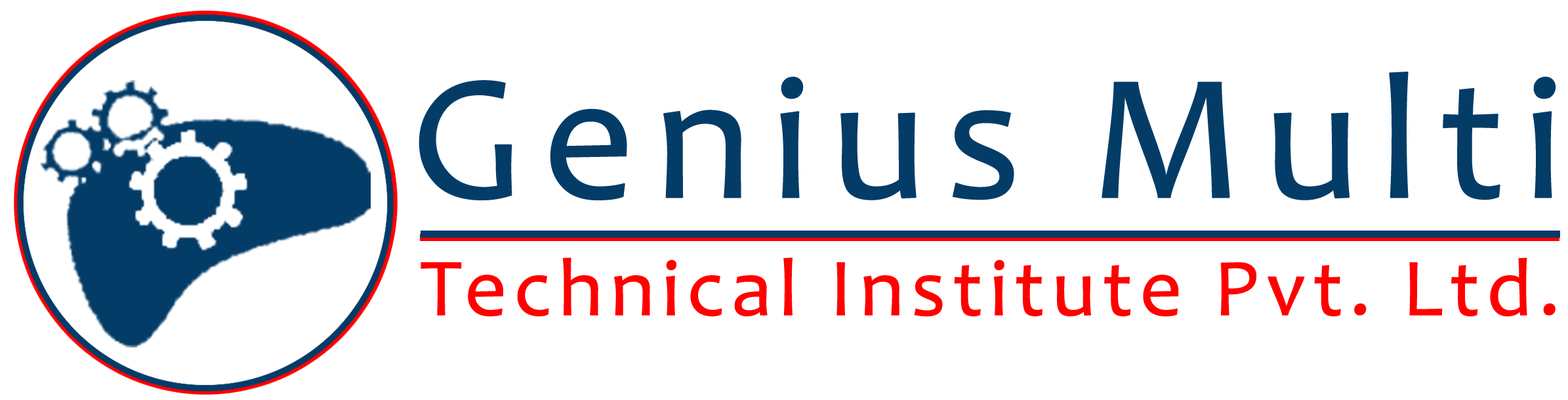
<style>
.page{position:relative;width:1568px;height:400px;background:#ffffff}
.page>*{position:absolute;margin:0}
.t1{font:180.4px "Candara";letter-spacing:0.08em;color:#043c68;font-weight:bold}
.t2{font:82.1px "Candara";letter-spacing:0.06em;color:#ff0000;font-weight:bold}
</style>
<div class="page">
<p class="t1" style="left:419px;top:72px;width:1137px;height:128px">Genius Multi</p>
<p class="t2" style="left:421px;top:257px;width:1135px;height:59px">Technical Institute Pvt. Ltd.</p>
</div>
